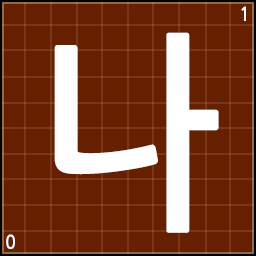
<style>
.page{position:relative;width:256px;height:256px;background:#662000}
.page>*{position:absolute;margin:0}
.t1{font:18.9px "NanumGothicBold";color:#ffffff;scale:0.93 1}
.t2{font:210.5px "NanumGothicBold";color:#ffffff;scale:0.93 1}
</style>
<div class="page">
<p class="t1" style="left:241px;top:6px;width:5px;height:15px">1</p>
<p class="t2" style="left:54px;top:32px;width:165px;height:201px">나</p>
<p class="t1" style="left:6px;top:234px;width:9px;height:15px">0</p>
</div>
